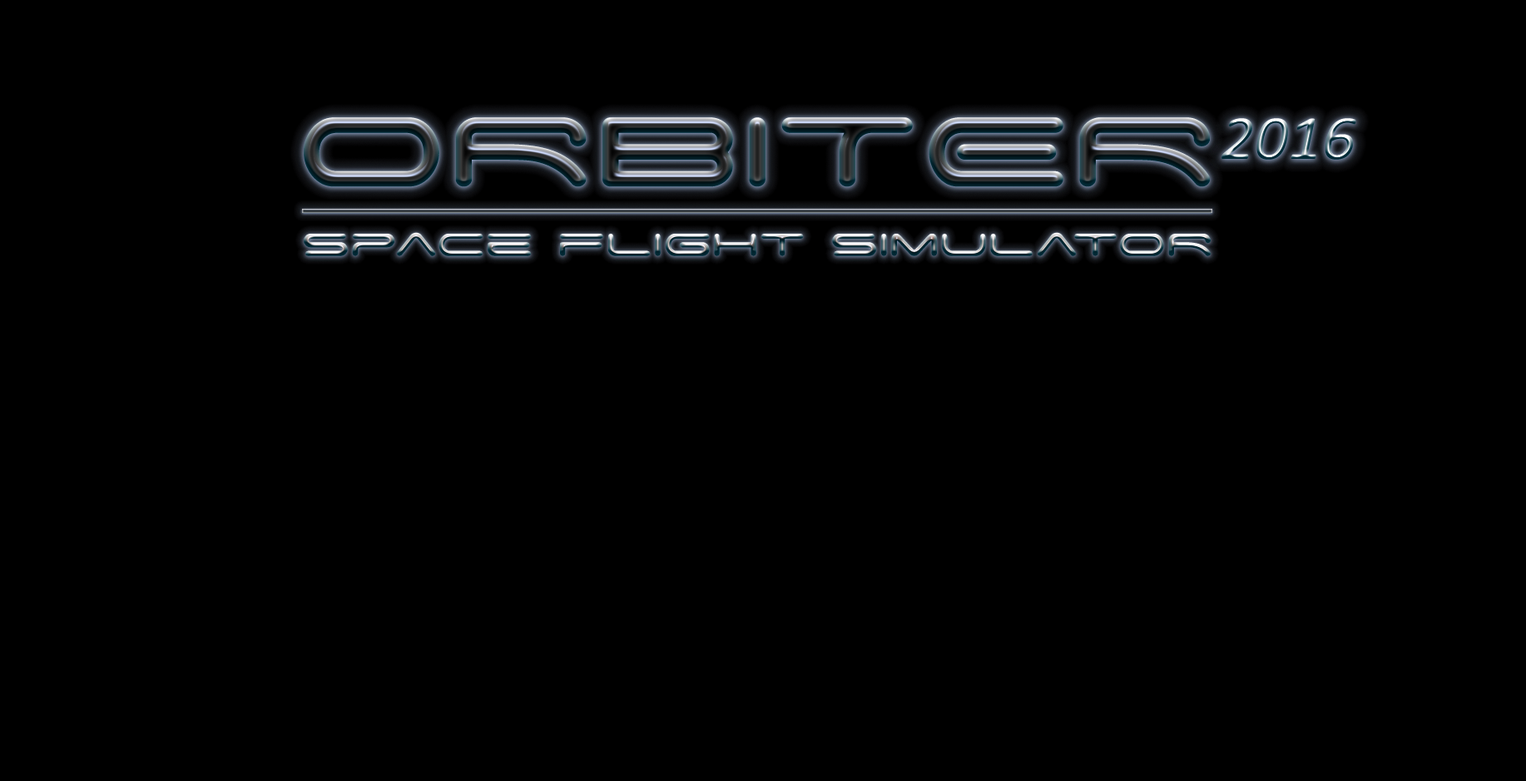
<style>
.page{position:relative;width:1526px;height:781px;background:#000000}
.page>*{position:absolute;margin:0}
.t1{font:158.1px "SpaceAge";scale:1.05 1}
.t2{font:63.2px "Calibri-Italic";scale:1.05 1}
.t3{font:50.6px "SpaceAge";scale:1.05 1}
</style>
<div class="page">
<p class="t1" style="left:303px;top:117px;width:907px;height:70px">ORBITER</p>
<p class="t2" style="left:1222px;top:118px;width:134px;height:42px">2016</p>
<p class="t3" style="left:304px;top:232px;width:907px;height:24px">space flight simulatoR</p>
</div>
